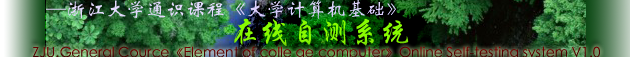
<style>
.page{position:relative;width:630px;height:57px}
.page>*{position:absolute;margin:0}
.t1{font:20px "STXinwei";color:#e2d9fc}
.t2{font:30px "STXingkai";color:#88fa02}
</style>
<div class="page">
<p class="t1" style="left:46px;top:0px;width:350px;height:19px">—浙江大学通识课程《大学计算机基础》</p>
<p class="t2" style="left:234px;top:18px;width:175px;height:28px">在线自测系统</p>
</div>
